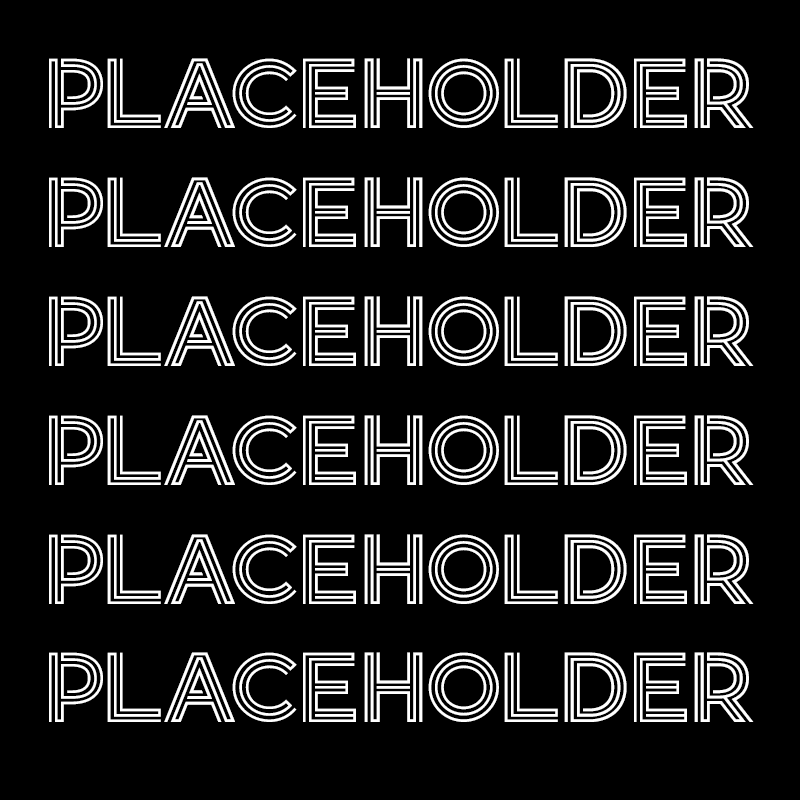
<style>
.page{position:relative;width:800px;height:800px;background:#000000}
.page>*{position:absolute;margin:0}
.t1{font:99.1px "Retrolight";color:#ffffff;text-transform:uppercase}
</style>
<div class="page">
<p class="t1" style="left:49px;top:58px;width:705px;height:664px;text-align:center">Placeholder<br>Placeholder<br>Placeholder<br>Placeholder<br>Placeholder<br>Placeholder</p>
</div>
